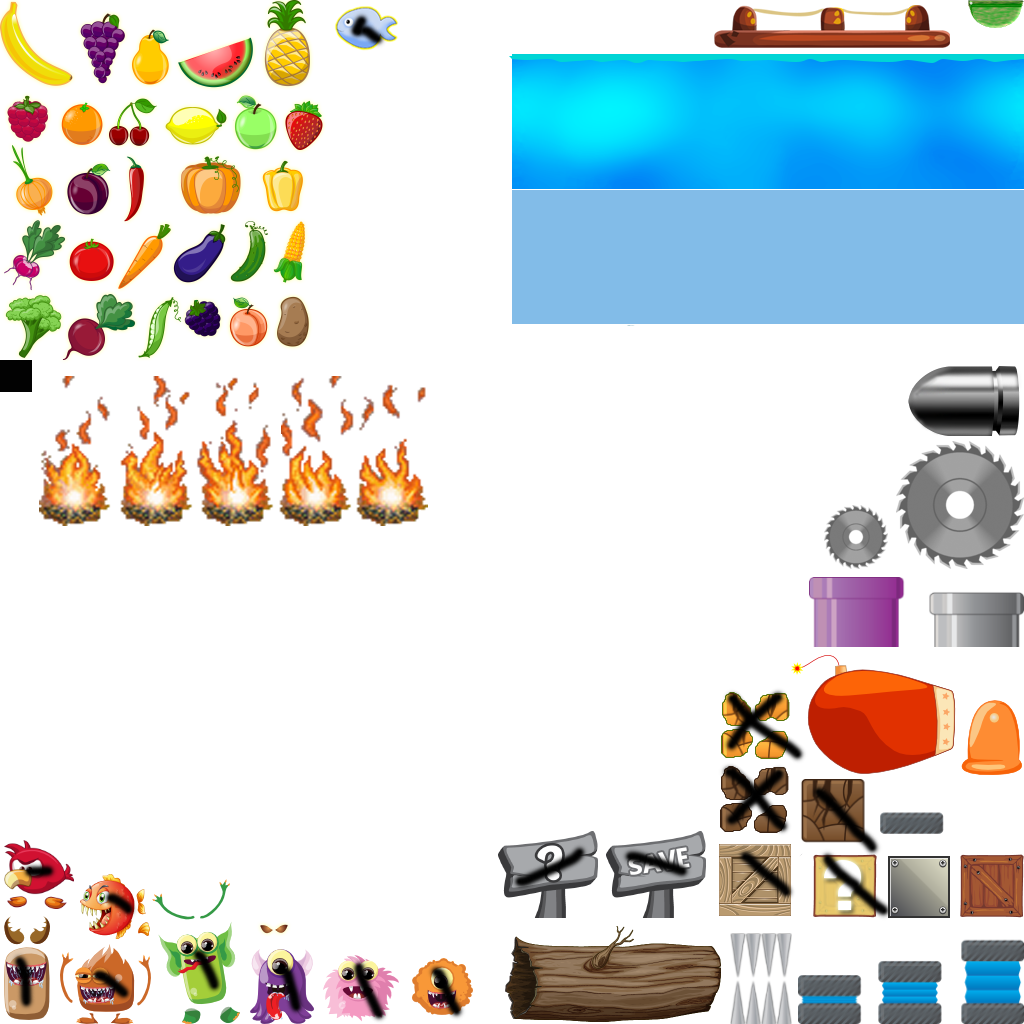
<style>
.page{position:relative;width:1024px;height:1024px;background:#ffffff}
.page>*{position:absolute;margin:0}
.t1{font:25px "MicrosoftTaiLe-Bold"}
</style>
<div class="page">
<p class="t1" style="left:628px;top:847px;width:62px;height:28px;rotate:-9deg">SAVE</p>
</div>
